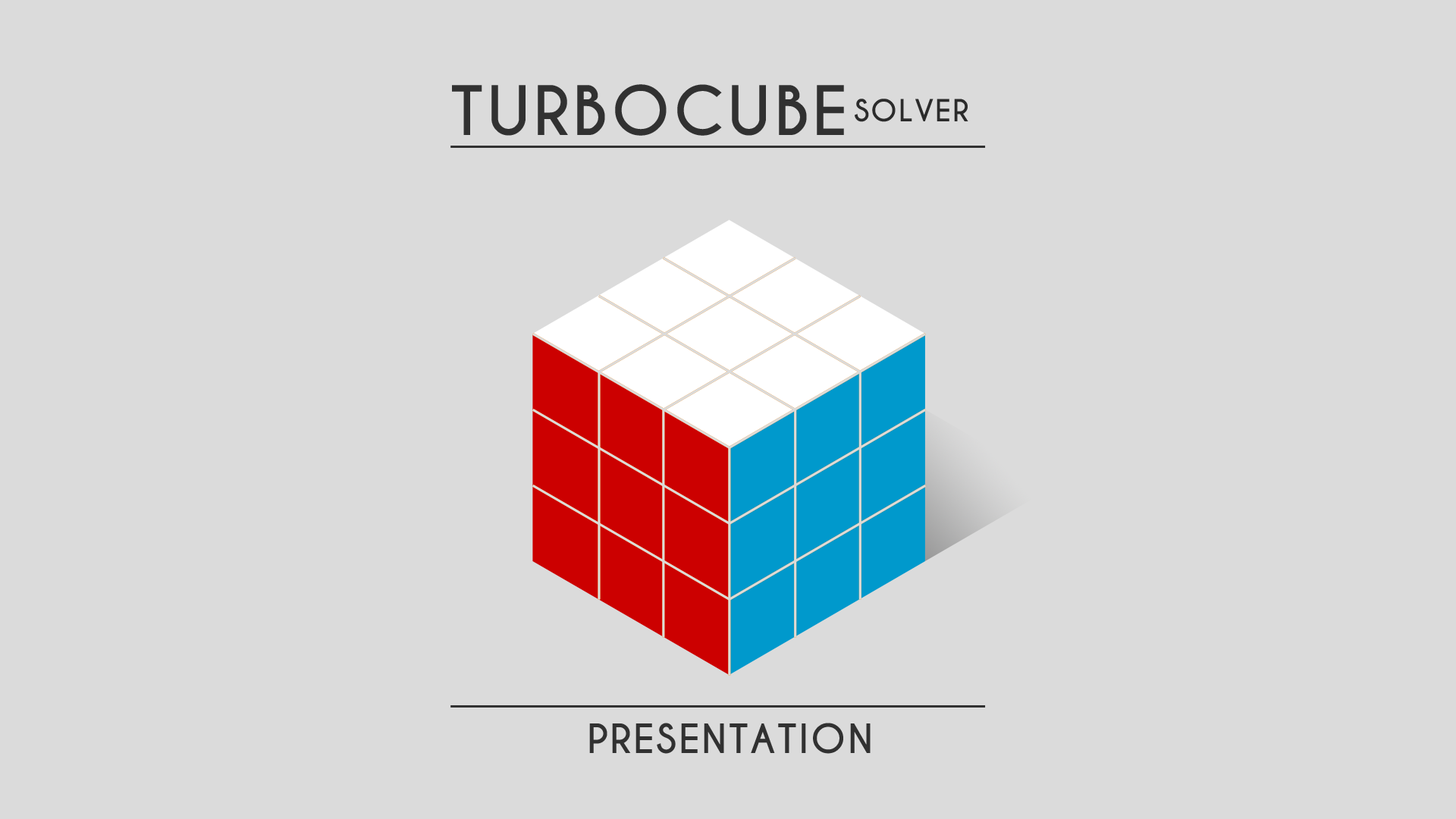
<style>
.page{position:relative;width:1456px;height:819px;background:#dbdbdb}
.page>*{position:absolute;margin:0}
.t1{font:63.8px "CaviarDreams-Bold";letter-spacing:0.05em;color:#313131}
.t2{font:28.6px "CaviarDreams-Bold";letter-spacing:0.05em;color:#2b2b2b}
.t3{font:37.9px "CaviarDreams-Bold";letter-spacing:0.05em;color:#313131}
</style>
<div class="page">
<p class="t1" style="left:452px;top:84px;width:392px;height:52px">TURBOCUBE</p>
<p class="t2" style="left:855px;top:99px;width:113px;height:23px">SOLVER</p>
<p class="t3" style="left:589px;top:723px;width:282px;height:31px">PRESENTATION</p>
</div>
